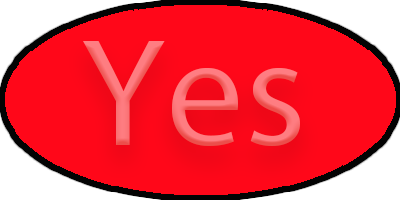
<style>
.page{position:relative;width:400px;height:200px;background:#ff0719}
.page>*{position:absolute;margin:0}
.t1{font:154.4px "MyriadPro-Regular";letter-spacing:0.01em;color:#fd7a7e}
</style>
<div class="page">
<p class="t1" style="left:83px;top:41px;width:217px;height:105px">Yes</p>
</div>
